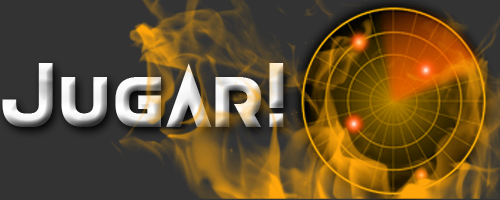
<style>
.page{position:relative;width:500px;height:200px;background:#333333}
.page>*{position:absolute;margin:0}
.t1{font:93.1px "Armwarmer"}
</style>
<div class="page">
<p class="t1" style="left:2px;top:63px;width:282px;height:64px">Jugar!</p>
</div>
